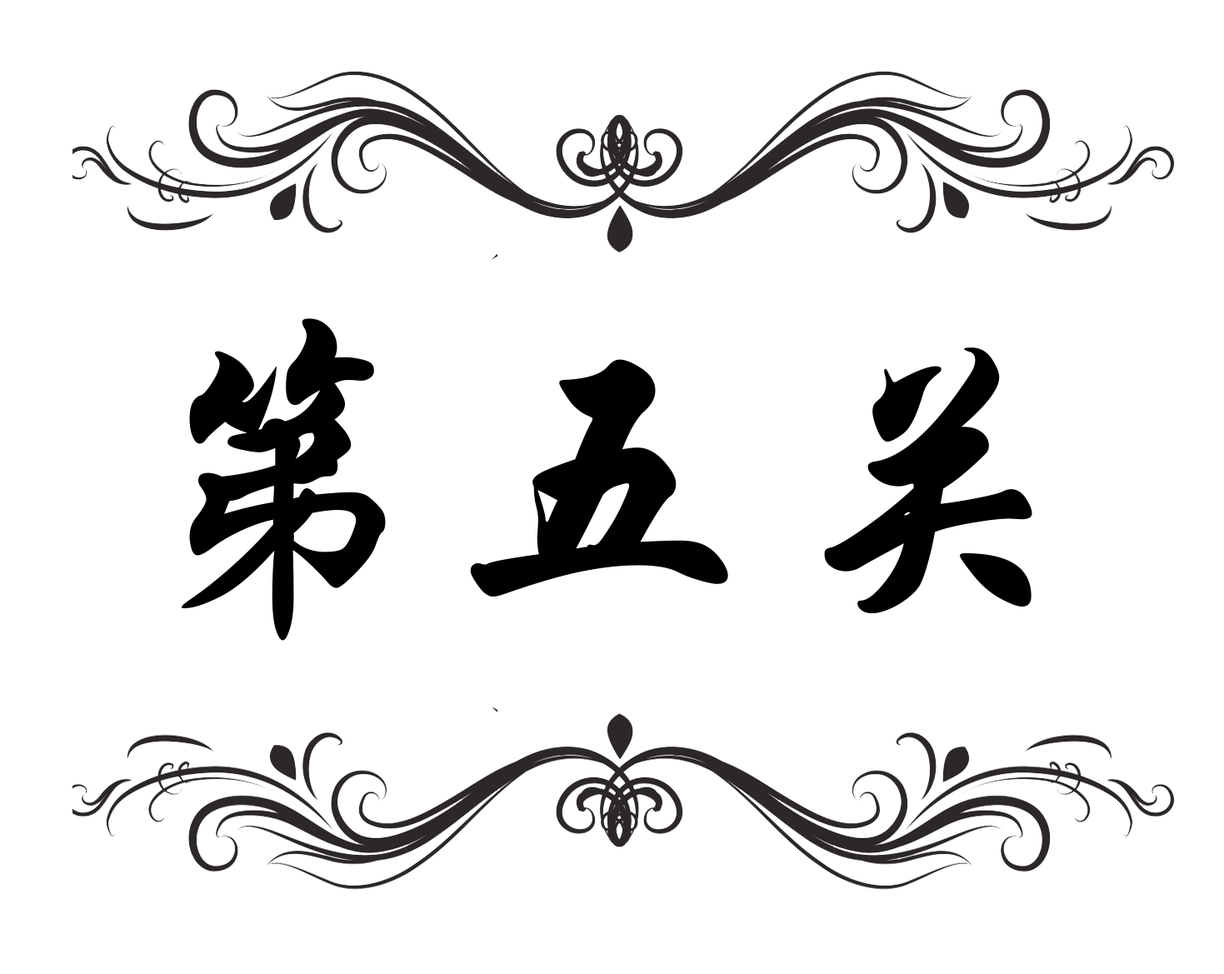
<style>
.page{position:relative;width:1224px;height:974px;background:#ffffff}
.page>*{position:absolute;margin:0}
.t1{font:333.3px "STXingkai";color:#000000}
</style>
<div class="page">
<p class="t1" style="left:182px;top:318px;width:850px;height:323px">第五关</p>
</div>
